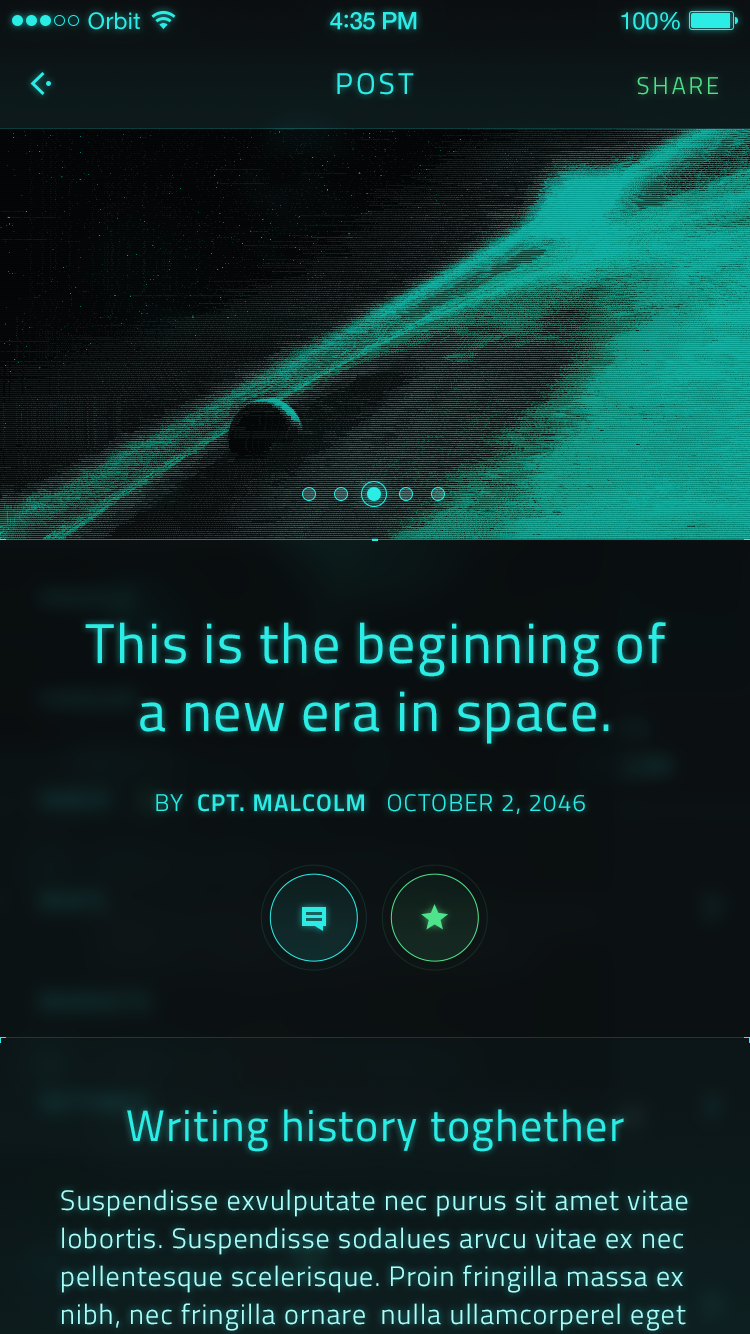
<style>
.page{position:relative;width:750px;height:1334px}
.page>*{position:absolute;margin:0}
.t1{font:23px "HelveticaNeue";letter-spacing:0.02em;color:#2bede6}
.t2{font:24px "HelveticaNeue-Medium";letter-spacing:-0.02em;color:#2bede6}
.t3{font:26px "Avenir-Medium";letter-spacing:-0.02em;color:#2bede6}
.t4{font:24px "HelveticaNeue";letter-spacing:-0.02em;color:#2bede6}
.t5{font:30px "Titillium-Regular";letter-spacing:0.1em;color:#2bede6;text-transform:uppercase}
.t6{font:24px "Titillium-Light";letter-spacing:0.12em;color:#4fe38b;text-transform:uppercase}
.t7{font:56px/68px "Titillium-Regular";letter-spacing:0.03em;color:#2bede6}
.t8{font:24px "Titillium-Light";letter-spacing:0.05em;color:#2bede6;text-transform:uppercase}
.t9{font:24px "Titillium-Semibold";letter-spacing:0.05em;color:#2bede6;text-transform:uppercase}
.t10{font:44px "Titillium-Regular";letter-spacing:0.03em;color:#2bede6}
</style>
<div class="page">
<p class="t1" style="left:88px;top:12px;width:52px;height:18px">Orbit</p>
<p class="t2" style="left:330px;top:12px;width:87px;height:18px">4<span class="t3">:</span>35 PM</p>
<p class="t4" style="left:621px;top:12px;width:59px;height:18px">100%</p>
<p class="t5" style="left:337px;top:73px;width:77px;height:22px">Post</p>
<p class="t6" style="left:637px;top:77px;width:81px;height:18px">Share</p>
<p class="t7" style="left:85px;top:622px;width:581px;height:122px;text-align:center">This is the beginning of<br>a new era in space.</p>
<p class="t8" style="left:156px;top:794px;width:429px;height:20px">BY  <span class="t9">CPT. Malcolm </span>  OCTOBER 2, 2046</p>
<p class="t10" style="left:127px;top:1109px;width:497px;height:43px">Writing history toghether</p>
</div>
